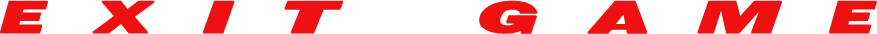
<style>
.page{position:relative;width:877px;height:34px;background:#ffffff}
.page>*{position:absolute;margin:0}
.t1{font:60px "Tactical-Espionage-Action";letter-spacing:0.9em;color:#ef1111;text-transform:uppercase;font-weight:bold}
</style>
<div class="page">
<p class="t1" style="left:0px;top:0px;width:877px;height:34px">Exit GAME</p>
</div>
